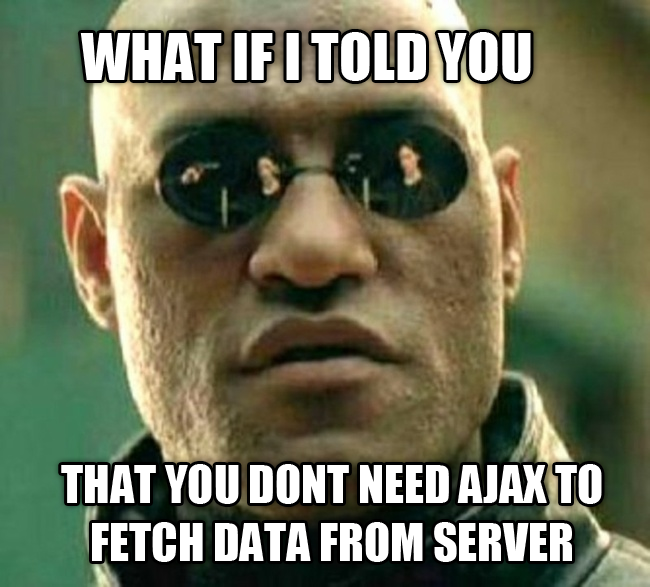
<style>
.page{position:relative;width:650px;height:587px}
.page>*{position:absolute;margin:0}
.t1{font:60px "Impact";color:#ffffff}
.t2{font:48px "Impact";color:#ffffff}
</style>
<div class="page">
<p class="t1" style="left:80px;top:32px;width:451px;height:49px">WHAT IF I TOLD YOU</p>
<p class="t2" style="left:61px;top:464px;width:541px;height:98px;text-align:center">THAT YOU DONT NEED AJAX TO FETCH DATA FROM SERVER</p>
</div>
